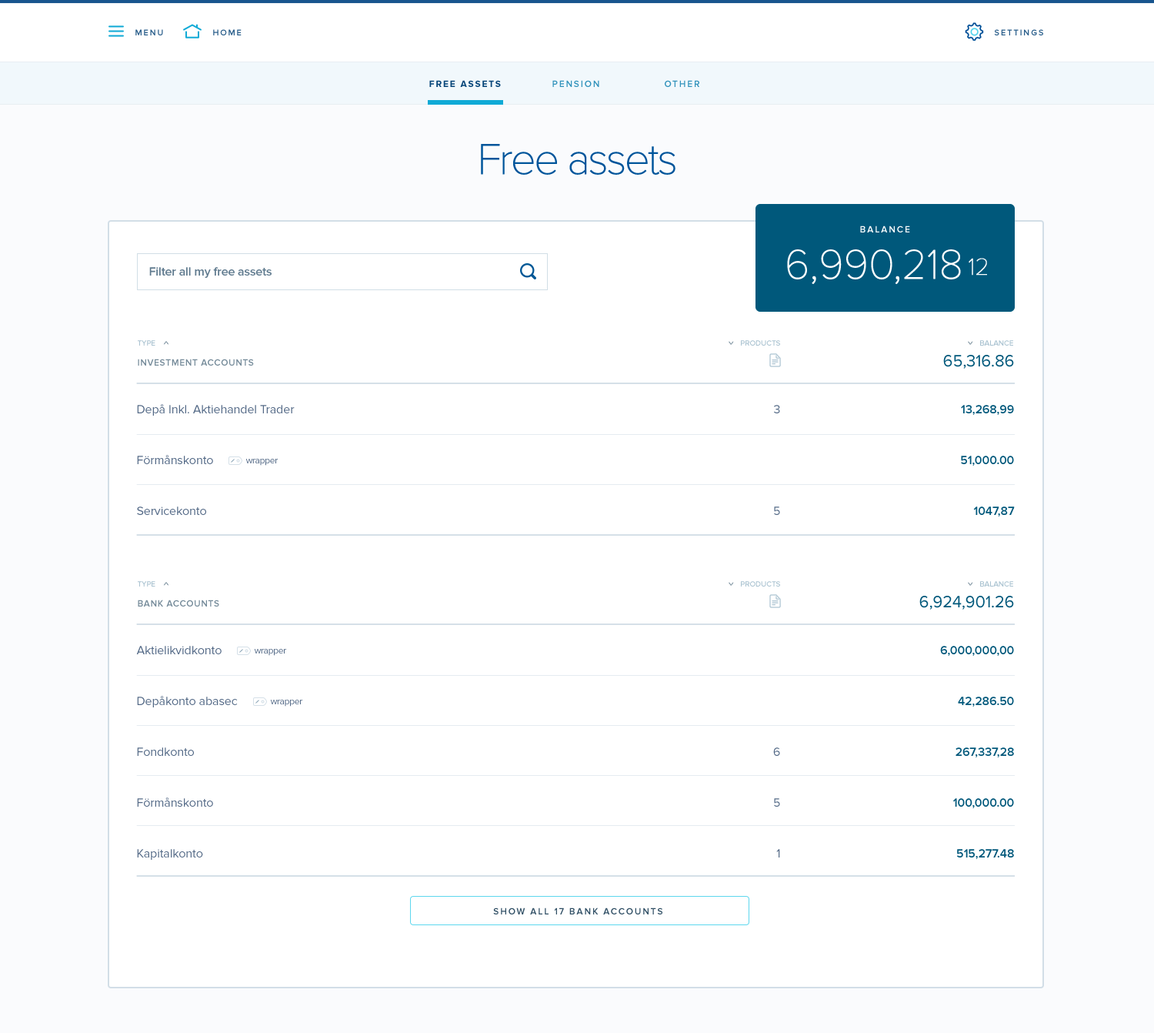
<style>
.page{position:relative;width:1154px;height:1033px;background:#ffffff}
.page>*{position:absolute;margin:0}
.t1{font:8.5px "ProximaNova-Semibold";letter-spacing:0.17em;color:#285d8a}
.t2{font:9.2px "ProximaNova-Bold";letter-spacing:0.15em;color:#064579}
.t3{font:9.2px "ProximaNova-Semibold";letter-spacing:0.15em;color:#3092bb}
.t4{font:44.6px "ProximaNovaT-Thin";letter-spacing:-0.072em;color:#00559b;font-weight:bold}
.t5{font:9.2px "ProximaNova-Semibold";letter-spacing:0.16em;color:#ffffff}
.t6{font:43.1px "ProximaNovaT-Thin";letter-spacing:-0.025em;color:#ffffff;font-weight:bold}
.t7{font:24.6px "ProximaNovaT-Thin";letter-spacing:-0.025em;color:#ffffff;font-weight:bold}
.t8{font:12.3px "ProximaNova-Semibold";letter-spacing:-0.01em;color:#5f7a8e}
.t9{font:7.7px "ProximaNova-Semibold";letter-spacing:-0.01em;color:#a9c2d0}
.t10{font:8.5px "ProximaNova-Semibold";letter-spacing:0.05em;color:#748a99;scale:1.5 1}
.t11{font:9.2px "ProximaNova-Semibold";letter-spacing:0.05em;color:#748a99}
.t12{font:16.9px "ProximaNova-Regular";letter-spacing:-0.01em;color:#00587b}
.t13{font:12.3px/50.8px "ProximaNova-Regular";letter-spacing:-0.005em;color:#536986}
.t14{font:12.3px/50.8px "ProximaNova-Semibold";letter-spacing:-0.01em;color:#00587b}
.t15{font:9.2px "ProximaNova-Regular";letter-spacing:-0.025em;color:#536986}
.t16{font:9.2px "ProximaNova-Semibold";letter-spacing:0.155em;color:#2f4e64}
</style>
<div class="page">
<p class="t1" style="left:135px;top:29px;width:28px;height:6px">MENU</p>
<p class="t1" style="left:213px;top:29px;width:29px;height:6px">HOME</p>
<p class="t1" style="left:994px;top:29px;width:50px;height:6px">SETTINGS</p>
<p class="t2" style="left:429px;top:80px;width:72px;height:7px">FREE ASSETS</p>
<p class="t3" style="left:553px;top:80px;width:47px;height:7px">PENSION</p>
<p class="t3" style="left:665px;top:80px;width:35px;height:7px">OTHER</p>
<p class="t4" style="left:481px;top:144px;width:195px;height:31px">Free assets</p>
<p class="t5" style="left:860px;top:226px;width:50px;height:6px">BALANCE</p>
<p class="t6" style="left:787px;top:249px;width:174px;height:35px">6,990,218</p>
<p class="t7" style="left:969px;top:258px;width:18px;height:18px">12</p>
<p class="t8" style="left:149px;top:267px;width:123px;height:11px">Filter all my free assets</p>
<p class="t9" style="left:138px;top:340px;width:17px;height:6px">TYPE</p>
<p class="t10" style="left:163px;top:341px;width:6px;height:4px">^</p>
<p class="t10" style="left:729px;top:341px;width:5px;height:4px;rotate:180deg">^</p>
<p class="t9" style="left:741px;top:340px;width:39px;height:6px">PRODUCTS</p>
<p class="t10" style="left:968px;top:341px;width:6px;height:4px;rotate:180deg">^</p>
<p class="t9" style="left:981px;top:340px;width:33px;height:6px">BALANCE</p>
<p class="t11" style="left:138px;top:359px;width:116px;height:7px">INVESTMENT ACCOUNTS</p>
<p class="t12" style="left:944px;top:355px;width:70px;height:14px">65,316.86</p>
<p class="t13" style="left:137px;top:404px;width:158px;height:111px">Depå Inkl. Aktiehandel Trader<br>Förmånskonto<br>Servicekonto</p>
<p class="t13" style="left:774px;top:405px;width:6px;height:110px;text-align:right">3<br><br>5</p>
<p class="t14" style="left:961px;top:405px;width:54px;height:111px;text-align:right">13,268,99<br>51,000.00<br>1047,87</p>
<p class="t15" style="left:246px;top:459px;width:32px;height:7px">wrapper</p>
<p class="t9" style="left:138px;top:581px;width:17px;height:5px">TYPE</p>
<p class="t10" style="left:163px;top:582px;width:6px;height:4px">^</p>
<p class="t10" style="left:729px;top:582px;width:5px;height:4px;rotate:180deg">^</p>
<p class="t9" style="left:741px;top:581px;width:39px;height:5px">PRODUCTS</p>
<p class="t10" style="left:968px;top:582px;width:6px;height:4px;rotate:180deg">^</p>
<p class="t9" style="left:981px;top:581px;width:33px;height:5px">BALANCE</p>
<p class="t11" style="left:138px;top:600px;width:81px;height:6px">BANK ACCOUNTS</p>
<p class="t12" style="left:920px;top:596px;width:94px;height:14px">6,924,901.26</p>
<p class="t13" style="left:136px;top:646px;width:102px;height:214px">Aktielikvidkonto<br>Depåkonto abasec<br>Fondkonto<br>Förmånskonto<br>Kapitalkonto</p>
<p class="t15" style="left:254px;top:649px;width:32px;height:7px">wrapper</p>
<p class="t14" style="left:941px;top:646px;width:73px;height:213px;text-align:right">6,000,000,00<br>42,286.50<br>267,337,28<br>100,000.00<br>515,277.48</p>
<p class="t15" style="left:270px;top:700px;width:32px;height:7px">wrapper</p>
<p class="t13" style="left:774px;top:747px;width:6px;height:110px;text-align:right">6<br>5<br>1</p>
<p class="t16" style="left:493px;top:907px;width:170px;height:7px">SHOW ALL 17 BANK ACCOUNTS</p>
</div>
